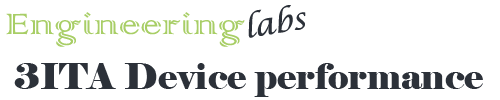
<style>
.page{position:relative;width:500px;height:100px;background:#ffffff}
.page>*{position:absolute;margin:0}
.t1{font:30px "LucidaCalligraphy-Italic";color:#2c3139}
.t2{font:38.5px "ColonnaMT";color:#a8ce66;scale:1.19 1}
.t3{font:36px "Elephant-Regular";color:#2c3139}
</style>
<div class="page">
<p class="t1" style="left:248px;top:5px;width:58px;height:33px;rotate:-9deg">labs</p>
<p class="t2" style="left:6px;top:12px;width:239px;height:35px">Engineering</p>
<p class="t3" style="left:14px;top:63px;width:469px;height:34px">3ITA Device performance</p>
</div>
